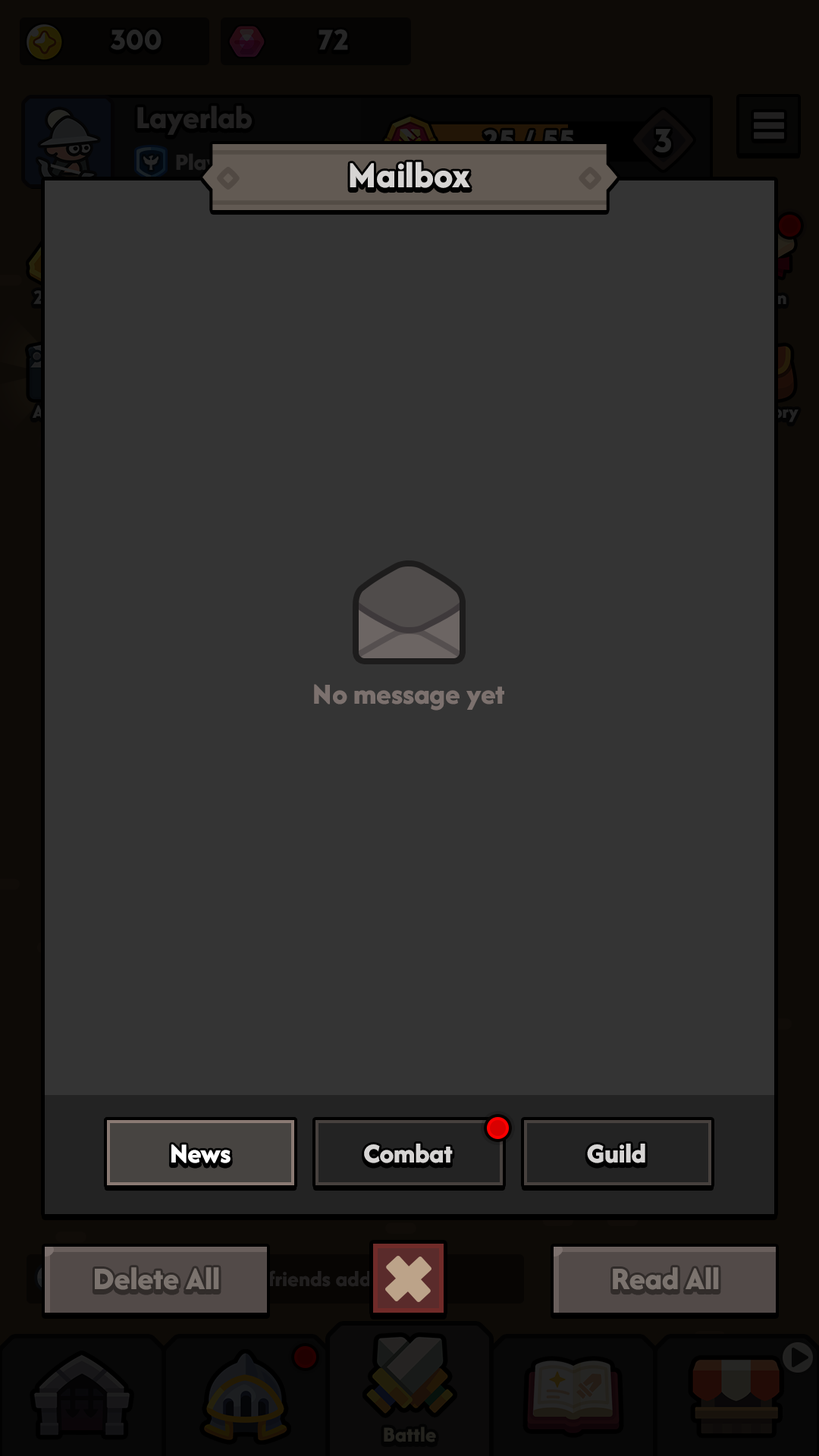
<style>
.page{position:relative;width:819px;height:1456px;background:#343434}
.page>*{position:absolute;margin:0}
.t1{font:37.9px "AfacadFlux-ExtraBold";color:#d6d4d3}
.t2{font:30.3px "AfacadFlux-ExtraBold";color:#7c716e}
.t3{font:28.4px "AfacadFlux-ExtraBold";color:#ffffff}
.t4{font:28.4px "AfacadFlux-ExtraBold";color:#d6d4d3}
.t5{font:32.8px "AfacadFlux-ExtraBold";color:#7b736e}
</style>
<div class="page">
<p class="t1" style="left:350px;top:162px;width:120px;height:26px">Mailbox</p>
<p class="t2" style="left:314px;top:684px;width:190px;height:27px">No message yet</p>
<p class="t3" style="left:171px;top:1144px;width:60px;height:19px">News</p>
<p class="t3" style="left:171px;top:1144px;width:60px;height:19px">News</p>
<p class="t4" style="left:364px;top:1144px;width:89px;height:19px">Combat</p>
<p class="t4" style="left:587px;top:1144px;width:58px;height:19px">Guild</p>
<p class="t5" style="left:95px;top:1267px;width:124px;height:23px">Delete All</p>
<p class="t5" style="left:613px;top:1267px;width:106px;height:23px">Read All</p>
</div>
